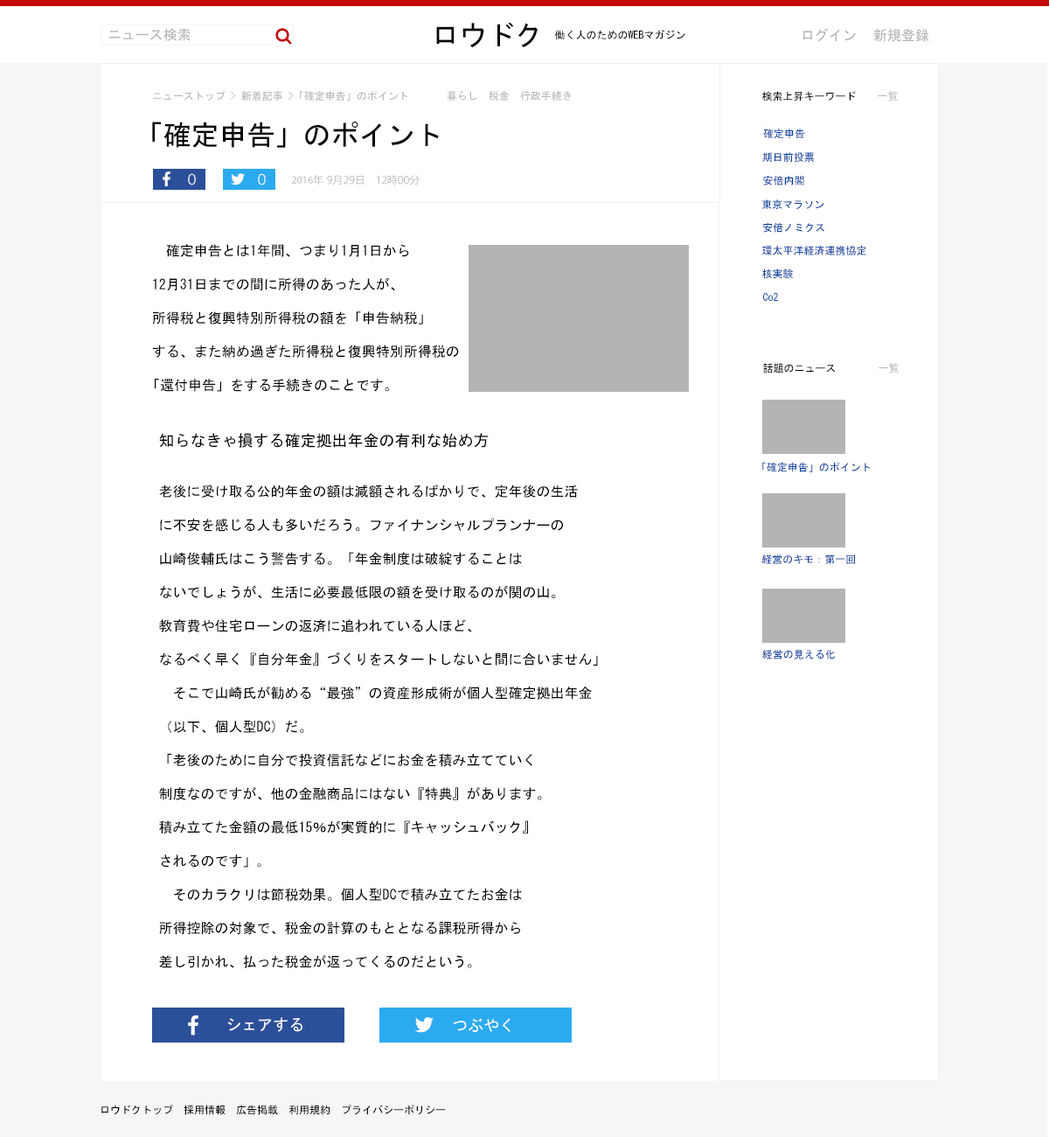
<style>
.page{position:relative;width:1049px;height:1137px;background:#ffffff}
.page>*{position:absolute;margin:0}
.t1{font:14px "MS-Gothic";color:#b4b4b4}
.t2{font:28px "MS-Gothic";color:#060606}
.t3{font:10.5px "MS-Gothic";color:#000000}
.t4{font:10.5px "MS-Gothic";color:#b4b4b4}
.t5{font:28px "MS-Gothic";color:#030000}
.t6{font:10.5px "MS-Gothic";color:#023e9f}
.t7{font:14px "KozGoPr6N-Regular";color:#f5f6f7}
.t8{font:10.5px "KozGoPr6N-Regular";color:#b4b4b4}
.t9{font:10.5px "MyriadPro-Regular";color:#b4b4b4}
.t10{font:14px "MS-Gothic";color:#000000}
.t11{font:15.7px "MS-Gothic";color:#000000}
.t12{font:15.7px "MS-Gothic";color:#ffffff}
</style>
<div class="page">
<p class="t1" style="left:108px;top:28px;width:83px;height:13px">ニュース検索</p>
<p class="t2" style="left:436px;top:22px;width:102px;height:26px">ロウドク</p>
<p class="t3" style="left:555px;top:30px;width:130px;height:10px">働く人のためのWEBマガジン</p>
<p class="t1" style="left:803px;top:28px;width:53px;height:14px">ログイン</p>
<p class="t1" style="left:873px;top:29px;width:56px;height:13px">新規登録</p>
<p class="t4" style="left:153px;top:90px;width:254px;height:11px">ニューストップ &gt; 新着記事 &gt; 「確定申告」のポイント</p>
<p class="t4" style="left:447px;top:91px;width:125px;height:10px">暮らし　税金　行政手続き</p>
<p class="t3" style="left:762px;top:91px;width:136px;height:10px">検索上昇キーワード    <span class="t4">一覧</span></p>
<p class="t5" style="left:152px;top:122px;width:287px;height:26px">「確定申告」のポイント</p>
<p class="t6" style="left:763px;top:129px;width:42px;height:9px">確定申告</p>
<p class="t6" style="left:762px;top:152px;width:52px;height:11px">期日前投票</p>
<p class="t7" style="left:188px;top:173px;width:8px;height:12px">０</p>
<p class="t7" style="left:258px;top:173px;width:8px;height:12px">０</p>
<p class="t8" style="left:292px;top:175px;width:128px;height:10px"><span class="t9">2016</span>年 9月29日　12時00分</p>
<p class="t6" style="left:763px;top:176px;width:41px;height:9px">安倍内閣</p>
<p class="t6" style="left:762px;top:199px;width:62px;height:10px">東京マラソン</p>
<p class="t6" style="left:763px;top:222px;width:61px;height:11px">安倍ノミクス</p>
<p class="t10" style="left:152px;top:244px;width:307px;height:148px">確定申告とは1年間、つまり1月1日から<br><br>12月31日までの間に所得のあった人が、<br><br>所得税と復興特別所得税の額を「申告納税」<br><br>する、また納め過ぎた所得税と復興特別所得税の<br><br>「還付申告」をする手続きのことです。</p>
<p class="t6" style="left:762px;top:246px;width:104px;height:9px">環太平洋経済連携協定</p>
<p class="t6" style="left:762px;top:268px;width:31px;height:11px">核実験</p>
<p class="t6" style="left:763px;top:292px;width:15px;height:9px">Co2</p>
<p class="t3" style="left:763px;top:363px;width:136px;height:10px">話題のニュース　　　　<span class="t4">一覧</span></p>
<p class="t10" style="left:159px;top:433px;width:439px;height:535px"><span class="t11">知らなきゃ損する確定拠出年金の有利な始め方<br></span><br><br>老後に受け取る公的年金の額は減額されるばかりで、定年後の生活<br><br>に不安を感じる人も多いだろう。ファイナンシャルプランナーの<br><br>山崎俊輔氏はこう警告する。「年金制度は破綻することは<br><br>ないでしょうが、生活に必要最低限の額を受け取るのが関の山。<br><br>教育費や住宅ローンの返済に追われている人ほど、<br><br>なるべく早く『自分年金』づくりをスタートしないと間に合いません」<br><br>　そこで山崎氏が勧める“最強”の資産形成術が個人型確定拠出年金<br><br>（以下、個人型DC）だ。<br><br>「老後のために自分で投資信託などにお金を積み立てていく<br><br>制度なのですが、他の金融商品にはない『特典』があります。<br><br>積み立てた金額の最低15％が実質的に『キャッシュバック』<br><br>されるのです」｡<br><br>　そのカラクリは節税効果。個人型DCで積み立てたお金は<br><br>所得控除の対象で、税金の計算のもととなる課税所得から<br><br>差し引かれ、払った税金が返ってくるのだという。</p>
<p class="t6" style="left:762px;top:462px;width:108px;height:10px">「確定申告」のポイント</p>
<p class="t6" style="left:762px;top:554px;width:93px;height:10px">経営のキモ：第一回</p>
<p class="t6" style="left:762px;top:649px;width:73px;height:10px">経営の見える化</p>
<p class="t12" style="left:227px;top:1017px;width:76px;height:15px">シェアする</p>
<p class="t12" style="left:453px;top:1018px;width:58px;height:14px">つぶやく</p>
<p class="t3" style="left:101px;top:1104px;width:345px;height:11px">ロウドクトップ　採用情報　広告掲載　利用規約　プライバシーポリシー</p>
</div>
